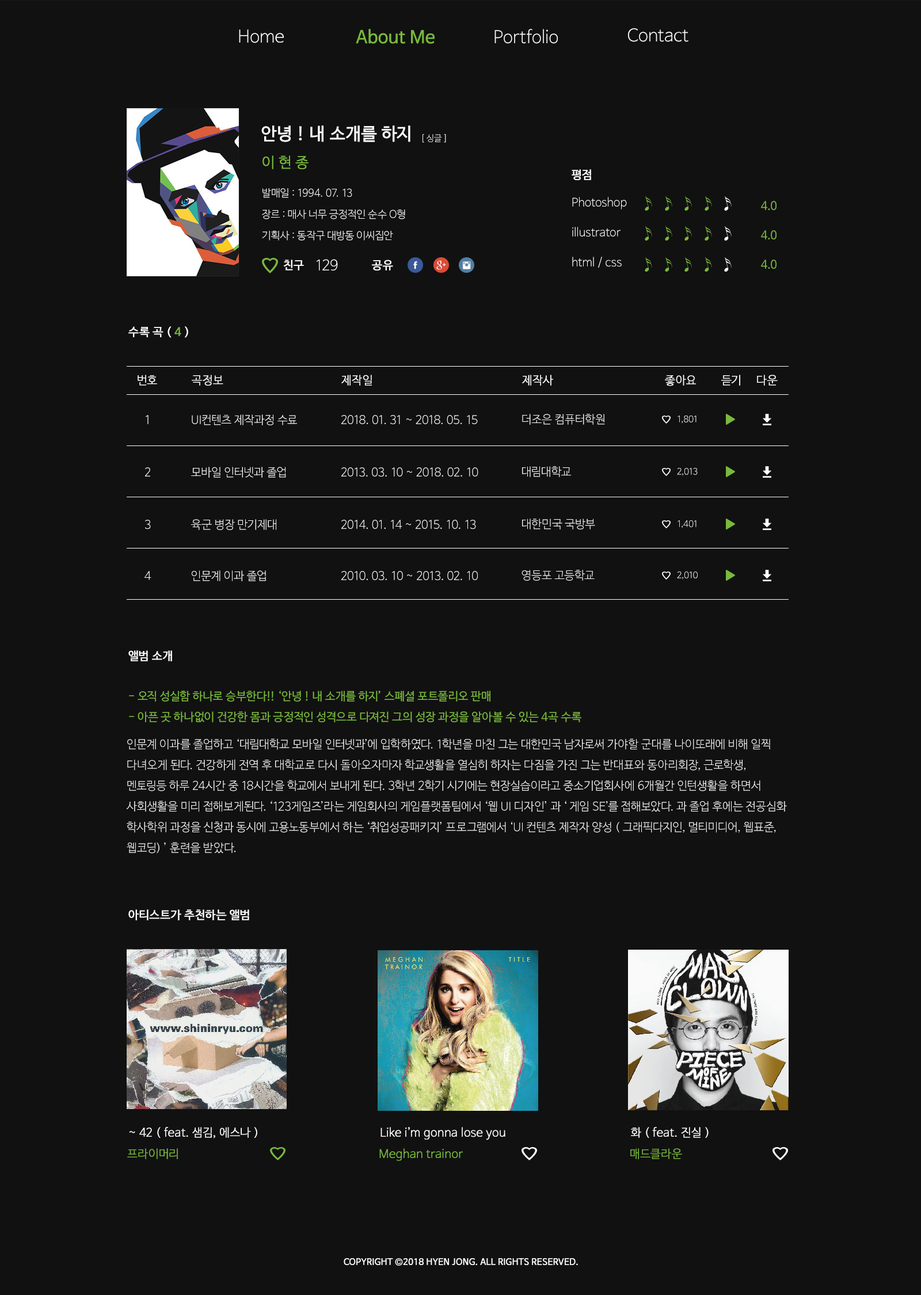
<style>
.page{position:relative;width:921px;height:1295px;background:#111111}
.page>*{position:absolute;margin:0}
.t1{font:17.3px "NanumBarunGothicLight";color:#ffffff}
.t2{font:17.3px "NanumBarunGothic";color:#79b93c;font-weight:bold}
.t3{font:17.3px "NanumBarunGothic";color:#ffffff;font-weight:bold}
.t4{font:8.6px "NanumBarunGothicLight";color:#fefefe}
.t5{font:14.4px "NanumBarunGothicLight";color:#79b93c;font-weight:bold}
.t6{font:11.5px/29.9px "NanumBarunGothicLight";color:#fefefe}
.t7{font:11.5px/27.6px "NanumBarunGothic";color:#ffffff;font-weight:bold}
.t8{font:11.5px/27.6px "NanumBarunGothicLight";color:#fefefe}
.t9{font:10.4px "NanumBarunGothicLight";color:#fefefe}
.t10{font:11.5px/29.4px "NanumBarunGothic";color:#79b93c}
.t11{font:11.5px "NanumBarunGothic";color:#ffffff;font-weight:bold}
.t12{font:14.4px "NanumBarunGothicLight";color:#fefefe}
.t13{font:11.5px "NanumBarunGothic";color:#79b93c;font-weight:bold}
.t14{font:11.5px "NanumBarunGothicLight";color:#ffffff;font-weight:bold}
.t15{font:11.5px "NanumBarunGothicLight";color:#fefefe}
.t16{font:11.5px "NanumBarunGothicLight";color:#ffffff}
.t17{font:8.6px "NanumBarunGothicLight";color:#ffffff}
.t18{font:11.5px/20.7px "NanumBarunGothic";color:#79b93c}
.t19{font:11.5px/20.7px "NanumBarunGothicLight";color:#ffffff}
.t20{font:11.5px "NanumBarunGothicLight";color:#79b93c;font-weight:bold}
.t21{font:8.6px "NanumBarunGothic";color:#fefefe;font-weight:bold}
</style>
<div class="page">
<p class="t1" style="left:239px;top:29px;width:45px;height:14px">Home</p>
<p class="t2" style="left:356px;top:29px;width:79px;height:15px">About Me</p>
<p class="t1" style="left:494px;top:29px;width:64px;height:15px">Portfolio</p>
<p class="t1" style="left:628px;top:28px;width:60px;height:14px">Contact</p>
<p class="t3" style="left:261px;top:125px;width:149px;height:17px">안녕 ! 내 소개를 하지</p>
<p class="t4" style="left:422px;top:134px;width:24px;height:9px">[ 싱글 ]</p>
<p class="t5" style="left:262px;top:155px;width:46px;height:14px">이 현 종</p>
<p class="t6" style="left:571px;top:169px;width:56px;height:99px"><span class="t7">평점<br></span><span class="t8">Photoshop<br></span>illustrator<br>html / css</p>
<p class="t9" style="left:262px;top:188px;width:90px;height:10px">발매일 : 1994. 07. 13</p>
<p class="t9" style="left:262px;top:209px;width:143px;height:10px">장르 : 매사 너무 긍정적인 순수 O형</p>
<p class="t10" style="left:761px;top:201px;width:15px;height:68px">4.0<br>4.0<br>4.0</p>
<p class="t9" style="left:262px;top:231px;width:131px;height:10px">기획사 : 동작구 대방동 이씨집안</p>
<p class="t11" style="left:283px;top:260px;width:21px;height:10px">친구</p>
<p class="t12" style="left:317px;top:259px;width:21px;height:11px">129</p>
<p class="t11" style="left:372px;top:260px;width:21px;height:10px">공유</p>
<p class="t11" style="left:128px;top:326px;width:60px;height:12px">수록 곡 ( <span class="t13">4 </span>)</p>
<p class="t14" style="left:138px;top:375px;width:19px;height:11px">번호</p>
<p class="t14" style="left:192px;top:375px;width:31px;height:11px">곡정보</p>
<p class="t14" style="left:341px;top:375px;width:31px;height:11px">제작일</p>
<p class="t14" style="left:522px;top:375px;width:31px;height:11px">제작사</p>
<p class="t14" style="left:665px;top:375px;width:31px;height:11px">좋아요</p>
<p class="t14" style="left:721px;top:375px;width:19px;height:11px">듣기</p>
<p class="t14" style="left:757px;top:375px;width:21px;height:11px">다운</p>
<p class="t15" style="left:522px;top:414px;width:83px;height:11px">더조은 컴퓨터학원</p>
<p class="t16" style="left:146px;top:415px;width:2px;height:9px">1</p>
<p class="t15" style="left:192px;top:414px;width:105px;height:11px">UI컨텐츠 제작과정 수료</p>
<p class="t15" style="left:341px;top:415px;width:137px;height:9px">2018. 01. 31 ~ 2018. 05. 15</p>
<p class="t17" style="left:677px;top:416px;width:19px;height:8px">1,801</p>
<p class="t16" style="left:145px;top:467px;width:5px;height:10px">2</p>
<p class="t15" style="left:191px;top:467px;width:95px;height:11px">모바일 인터넷과 졸업</p>
<p class="t15" style="left:341px;top:467px;width:137px;height:10px">2013. 03. 10 ~ 2018. 02. 10</p>
<p class="t15" style="left:522px;top:466px;width:49px;height:11px">대림대학교</p>
<p class="t17" style="left:677px;top:468px;width:21px;height:8px">2,013</p>
<p class="t16" style="left:145px;top:520px;width:6px;height:9px">3</p>
<p class="t15" style="left:191px;top:519px;width:85px;height:11px">육군 병장 만기제대</p>
<p class="t15" style="left:341px;top:520px;width:135px;height:9px">2014. 01. 14 ~ 2015. 10. 13</p>
<p class="t15" style="left:522px;top:519px;width:73px;height:10px">대한민국 국방부</p>
<p class="t17" style="left:677px;top:520px;width:19px;height:8px">1,401</p>
<p class="t15" style="left:521px;top:570px;width:74px;height:11px">영등포 고등학교</p>
<p class="t16" style="left:144px;top:571px;width:7px;height:9px">4</p>
<p class="t15" style="left:192px;top:570px;width:74px;height:11px">인문계 이과 졸업</p>
<p class="t15" style="left:341px;top:571px;width:137px;height:9px">2010. 03. 10 ~ 2013. 02. 10</p>
<p class="t17" style="left:677px;top:571px;width:21px;height:9px">2,010</p>
<p class="t11" style="left:128px;top:650px;width:44px;height:11px">앨범 소개</p>
<p class="t18" style="left:129px;top:690px;width:452px;height:32px">- 오직 성실함 하나로 승부한다!! ‘안녕 ! 내 소개를 하지’ 스폐셜 포트폴리오 판매<br>- 아픈 곳 하나없이 건강한 몸과 긍정적인 성격으로 다져진 그의 성장 과정을 알아볼 수 있는 4곡 수록</p>
<p class="t19" style="left:126px;top:738px;width:661px;height:116px">인문계 이과를 졸업하고 ‘대림대학교 모바일 인터넷과’에 입학하였다. 1학년을 마친 그는 대한민국 남자로써 가야할 군대를 나이또래에 비해 일찍 다녀오게 된다. 건강하게 전역 후 대학교로 다시 돌아오자마자 학교생활을 열심히 하자는 다짐을 가진 그는 반대표와 동아리회장, 근로학생, 멘토링등 하루 24시간 중 18시간을 학교에서 보내게 된다. 3학년 2학기 시기에는 현장실습이라고 중소기업회사에 6개월간 인턴생활을 하면서 사회생활을 미리 접해보게된다. ‘123게임즈’라는 게임회사의 게임플랫폼팀에서 ‘웹 UI 디자인’ 과 ‘ 게임 SE’를 접해보았다. 과 졸업 후에는 전공심화 학사학위 과정을 신청과 동시에 고용노동부에서 하는 ‘취업성공패키지’ 프로그램에서 ‘UI 컨텐츠 제작자 양성 ( 그래픽다지인, 멀티미디어, 웹표준, 웹코딩) ’ 훈련을 받았다.</p>
<p class="t11" style="left:128px;top:909px;width:121px;height:11px">아티스트가 추천하는 앨범</p>
<p class="t14" style="left:129px;top:1127px;width:128px;height:11px">~ 42 ( feat. 샘김, 에스나 )</p>
<p class="t14" style="left:380px;top:1127px;width:125px;height:13px">Like i’m gonna lose you</p>
<p class="t14" style="left:631px;top:1127px;width:77px;height:11px">화 ( feat. 진실 )</p>
<p class="t20" style="left:127px;top:1148px;width:51px;height:11px">프라이머리</p>
<p class="t20" style="left:379px;top:1148px;width:84px;height:13px">Meghan trainor</p>
<p class="t20" style="left:630px;top:1148px;width:52px;height:11px">매드클라운</p>
<p class="t21" style="left:344px;top:1258px;width:234px;height:8px">COPYRIGHT ©2018 HYEN JONG. ALL RIGHTS RESERVED.</p>
</div>
